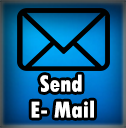
<style>
.page{position:relative;width:126px;height:128px}
.page>*{position:absolute;margin:0}
.t1{font:24px "TwCenMT-CondensedExtraBold";color:#ffffff}
</style>
<div class="page">
<p class="t1" style="left:40px;top:74px;width:42px;height:18px">Send</p>
<p class="t1" style="left:31px;top:100px;width:63px;height:18px">E- Mail</p>
</div>
